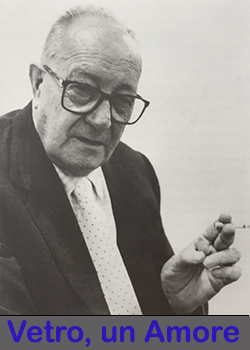
<style>
.page{position:relative;width:250px;height:350px}
.page>*{position:absolute;margin:0}
.t1{font:30px "ArialRoundedMTBold";color:#2e17b9}
</style>
<div class="page">
<p class="t1" style="left:7px;top:320px;width:232px;height:27px">Vetro, un Amore</p>
</div>
